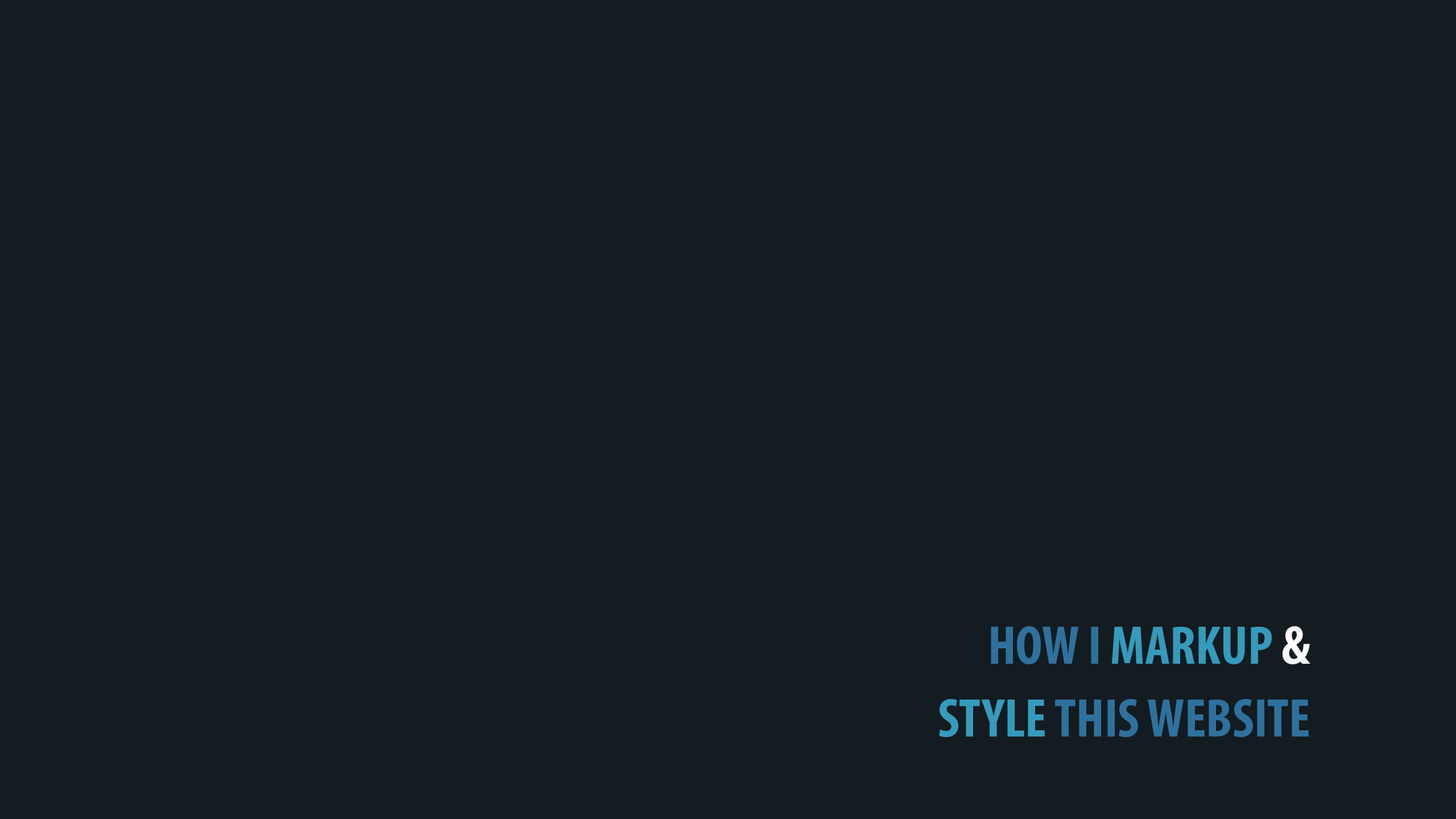
<style>
.page{position:relative;width:1456px;height:819px;background:#131c21}
.page>*{position:absolute;margin:0}
.t1{font:54.6px/72.8px "MyriadPro-BoldCond";color:#2f719d;text-transform:uppercase}
.t2{font:54.6px/72.8px "MyriadPro-BoldCond";color:#359bbc;text-transform:uppercase}
.t3{font:54.6px/72.8px "MyriadPro-BoldCond";color:#fcfcfc;text-transform:uppercase}
</style>
<div class="page">
<p class="t1" style="left:939px;top:626px;width:371px;height:111px;text-align:right">How I <span class="t2">Markup</span><span class="t3"> &amp;<br></span><span class="t2">Style</span> This Website</p>
</div>
